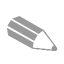
<style>
.page{position:relative;width:64px;height:64px;background:#ffffff}
.page>*{position:absolute;margin:0}
.t1{font:64px "ArialUnicodeMS";color:#999999}
</style>
<div class="page">
<p class="t1" style="left:7px;top:16px;width:51px;height:35px">✎</p>
</div>
